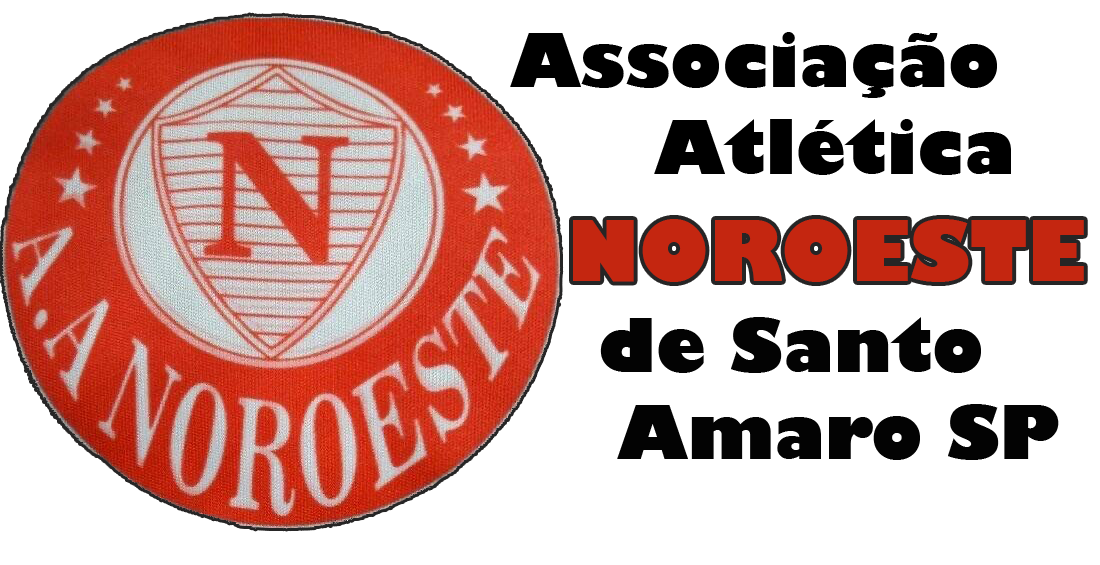
<style>
.page{position:relative;width:1100px;height:565px;background:#ffffff}
.page>*{position:absolute;margin:0}
.t1{font:72px "GillSans-UltraBold";color:#000000}
.t2{font:82px "GillSans-UltraBold";color:#c42610}
.t3{font:72px "GillSans-UltraBold";color:#030303}
</style>
<div class="page">
<p class="t1" style="left:510px;top:32px;width:501px;height:143px">Associação<br>    Atlética</p>
<p class="t2" style="left:573px;top:219px;width:511px;height:63px">NOROESTE</p>
<p class="t3" style="left:600px;top:317px;width:459px;height:143px">de Santo<br> Amaro SP</p>
</div>
